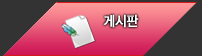
<style>
.page{position:relative;width:202px;height:56px;background:#333333}
.page>*{position:absolute;margin:0}
.t1{font:13.8px "YDIYGO330";letter-spacing:-0.025em;color:#ffffff;font-weight:bold;scale:0.91 1}
</style>
<div class="page">
<p class="t1" style="left:103px;top:14px;width:36px;height:14px">게시판</p>
</div>
